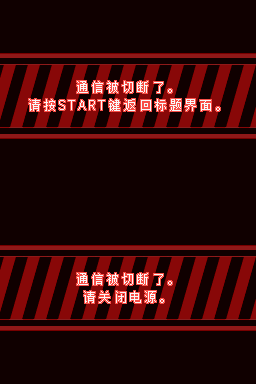
<style>
.page{position:relative;width:256px;height:384px;background:#100000}
.page>*{position:absolute;margin:0}
.t1{font:13px "Zfull-GB";letter-spacing:0.17em;color:#f8f8f8}
.t2{font:13px "NotoSansCJKsc-DemiLight";letter-spacing:0.17em;color:#f8f8f8}
</style>
<div class="page">
<p class="t1" style="left:77px;top:81px;width:95px;height:12px">通信被切断了。</p>
<p class="t1" style="left:29px;top:99px;width:191px;height:12px">请按<span class="t2">START</span>键返回标题界面。</p>
<p class="t1" style="left:77px;top:273px;width:95px;height:12px">通信被切断了。</p>
<p class="t1" style="left:84px;top:291px;width:80px;height:12px">请关闭电源。</p>
</div>
